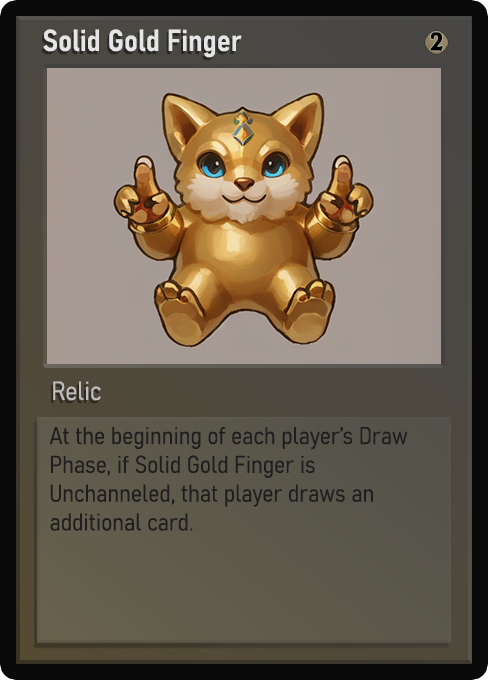
<style>
.page{position:relative;width:488px;height:680px}
.page>*{position:absolute;margin:0}
.t1{font:30px "Bahnschrift-SemiBoldSemiCondensed";color:#f2f2f2;font-weight:bold}
.t2{font:25px "WTRRoycroft";color:#000000;font-weight:bold;scale:1.09 1}
.t3{font:26px "Bahnschrift-LightSemiCondensed";color:#c8c8c8;font-weight:bold}
.t4{font:24px "Bahnschrift-LightSemiCondensed";color:#1e1e1e;font-weight:bold}
</style>
<div class="page">
<p class="t1" style="left:43px;top:29px;width:199px;height:29px;opacity:0.9">Solid Gold Finger</p>
<p class="t2" style="left:430px;top:32px;width:13px;height:19px">2</p>
<p class="t3" style="left:53px;top:381px;width:48px;height:20px;opacity:0.9">Relic</p>
<p class="t4" style="left:49px;top:427px;width:359px;height:104px">At the beginning of each player’s Draw Phase, if Solid Gold Finger is Unchanneled, that player draws an additional card.</p>
</div>
